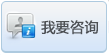
<style>
.page{position:relative;width:109px;height:55px}
.page>*{position:absolute;margin:0}
.t1{font:14px "MicrosoftYaHei";color:#4e5155;font-weight:bold}
</style>
<div class="page">
<p class="t1" style="left:41px;top:20px;width:58px;height:15px">我要咨询</p>
</div>
